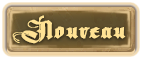
<style>
.page{position:relative;width:142px;height:59px}
.page>*{position:absolute;margin:0}
.t1{font:15.8px/33.1px "MagnificentPersonalUse";letter-spacing:0.05em;color:#ffe294;font-weight:bold;scale:1.35 1}
</style>
<div class="page">
<p class="t1" style="left:12px;top:15px;width:114px;height:29px;text-align:center">Nouveau</p>
</div>
